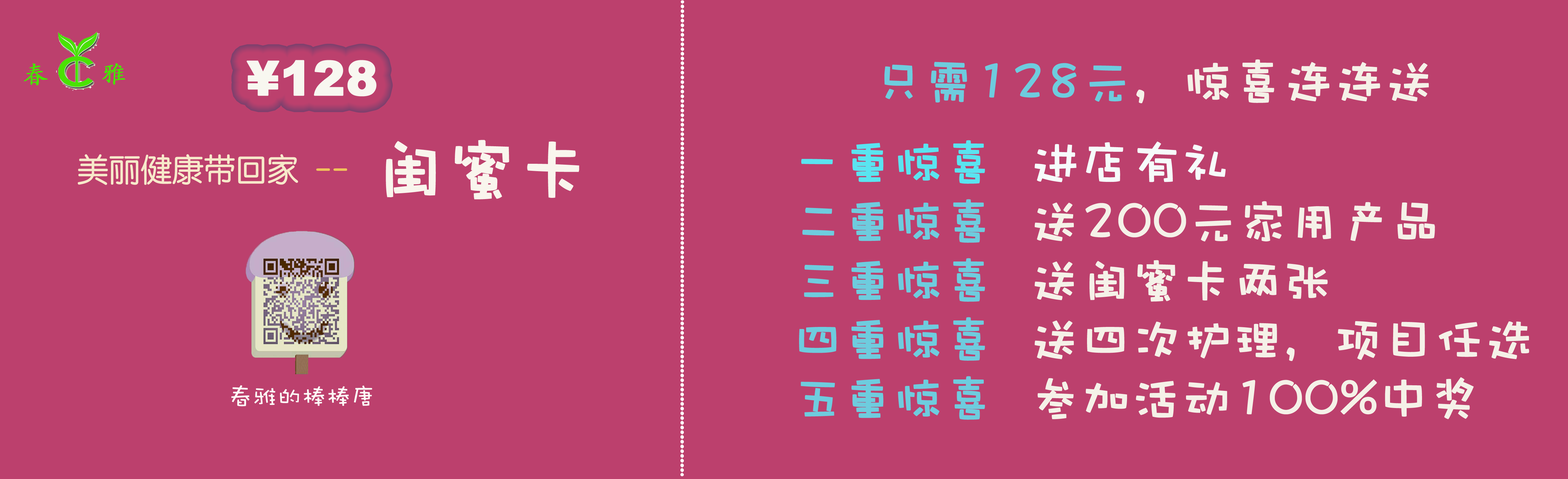
<style>
.page{position:relative;width:1568px;height:479px;background:#bc406d}
.page>*{position:absolute;margin:0}
.t1{font:24.6px "STKaitiSC-Regular";color:#48e303;font-weight:bold}
.t2{font:47.6px "Arial-Black";color:#f8f7f0;font-weight:bold}
.t3{font:49.2px "DFWaWaSC-W5";color:#6eccde;font-weight:bold}
.t4{font:49.2px "DFWaWaSC-W5";color:#f5f1e8;font-weight:bold}
.t5{font:70.7px "DFWaWaSC-W5";color:#f9f5ed;font-weight:bold}
.t6{font:49.2px "DFWaWaSC-W5";color:#5ae4f0;font-weight:bold}
.t7{font:49.2px "DFWaWaSC-W5";color:#f6fbfb;font-weight:bold}
.t8{font:31.7px "STYuanti-TC-Regular";color:#f7e9ca}
.t9{font:31.7px "STYuanti-TC-Regular";color:#f0c25a}
.t10{font:24.6px "DFWaWaSC-W5";color:#fdfbf8;font-variant:small-caps}
</style>
<div class="page">
<p class="t1" style="left:24px;top:63px;width:24px;height:22px">春</p>
<p class="t1" style="left:102px;top:63px;width:23px;height:22px">雅</p>
<p class="t2" style="left:246px;top:60px;width:130px;height:37px">¥128</p>
<p class="t3" style="left:884px;top:59px;width:545px;height:44px">只需128元<span class="t4">，惊喜连连送</span></p>
<p class="t5" style="left:386px;top:140px;width:193px;height:59px">闺蜜卡</p>
<p class="t4" style="left:799px;top:140px;width:730px;height:280px"><span class="t6">一重惊喜  </span><span class="t7">进店有礼 <br></span><span class="t3">二重惊喜  </span>送200元家用产品<br><span class="t3">三重惊喜  </span>送闺蜜卡两张<br><span class="t3">四重惊喜  </span>送四次护理，项目任选<br><span class="t3">五重惊喜  </span>参加活动100%中奖</p>
<p class="t8" style="left:78px;top:154px;width:269px;height:31px">美丽健康带回家  <span class="t9">--</span></p>
<p class="t10" style="left:231px;top:385px;width:141px;height:22px">春雅的棒棒唐</p>
</div>
